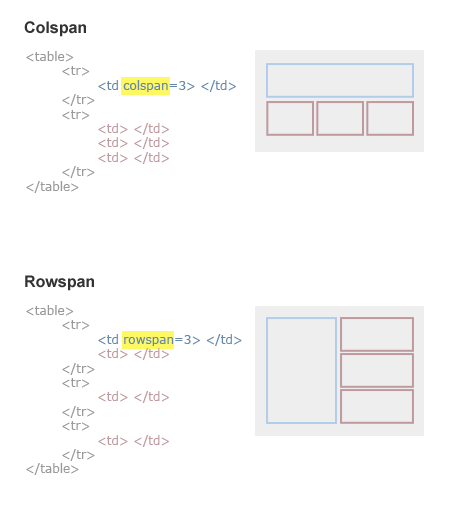
<style>
.page{position:relative;width:450px;height:506px;background:#ffffff}
.page>*{position:absolute;margin:0}
.t1{font:16px "Arial-BoldMT";color:#333333}
.t2{font:12px "Verdana";color:#be999e}
.t3{font:12px "Verdana";color:#999999}
.t4{font:12px "Verdana";color:#6588ab}
</style>
<div class="page">
<p class="t1" style="left:24px;top:21px;width:62px;height:16px">Colspan</p>
<p class="t2" style="left:26px;top:51px;width:210px;height:142px"><span class="t3">&lt;table&gt;<br> &lt;tr&gt;<br>  </span><span class="t4">&lt;td colspan=3&gt; &lt;/td&gt;<br></span><span class="t3"> &lt;/tr&gt;<br> &lt;tr&gt;<br>  </span>&lt;td&gt; &lt;/td&gt;<br>  &lt;td&gt; &lt;/td&gt;<br>  &lt;td&gt; &lt;/td&gt;<br><span class="t3"> &lt;/tr&gt;<br>&lt;/table&gt;</span></p>
<p class="t1" style="left:25px;top:275px;width:69px;height:16px">Rowspan</p>
<p class="t4" style="left:26px;top:305px;width:216px;height:170px"><span class="t3">&lt;table&gt;<br> &lt;tr&gt;<br>  </span>&lt;td rowspan=3&gt; &lt;/td&gt;<br>  <span class="t2">&lt;td&gt; &lt;/td&gt;<br></span><span class="t3"> &lt;/tr&gt;<br> &lt;tr&gt;<br>  </span><span class="t2">&lt;td&gt; &lt;/td&gt;<br></span><span class="t3"> &lt;/tr&gt;<br> &lt;tr&gt;<br>  </span><span class="t2">&lt;td&gt; &lt;/td&gt;<br></span><span class="t3"> &lt;/tr&gt;<br>&lt;/table&gt;</span></p>
</div>
